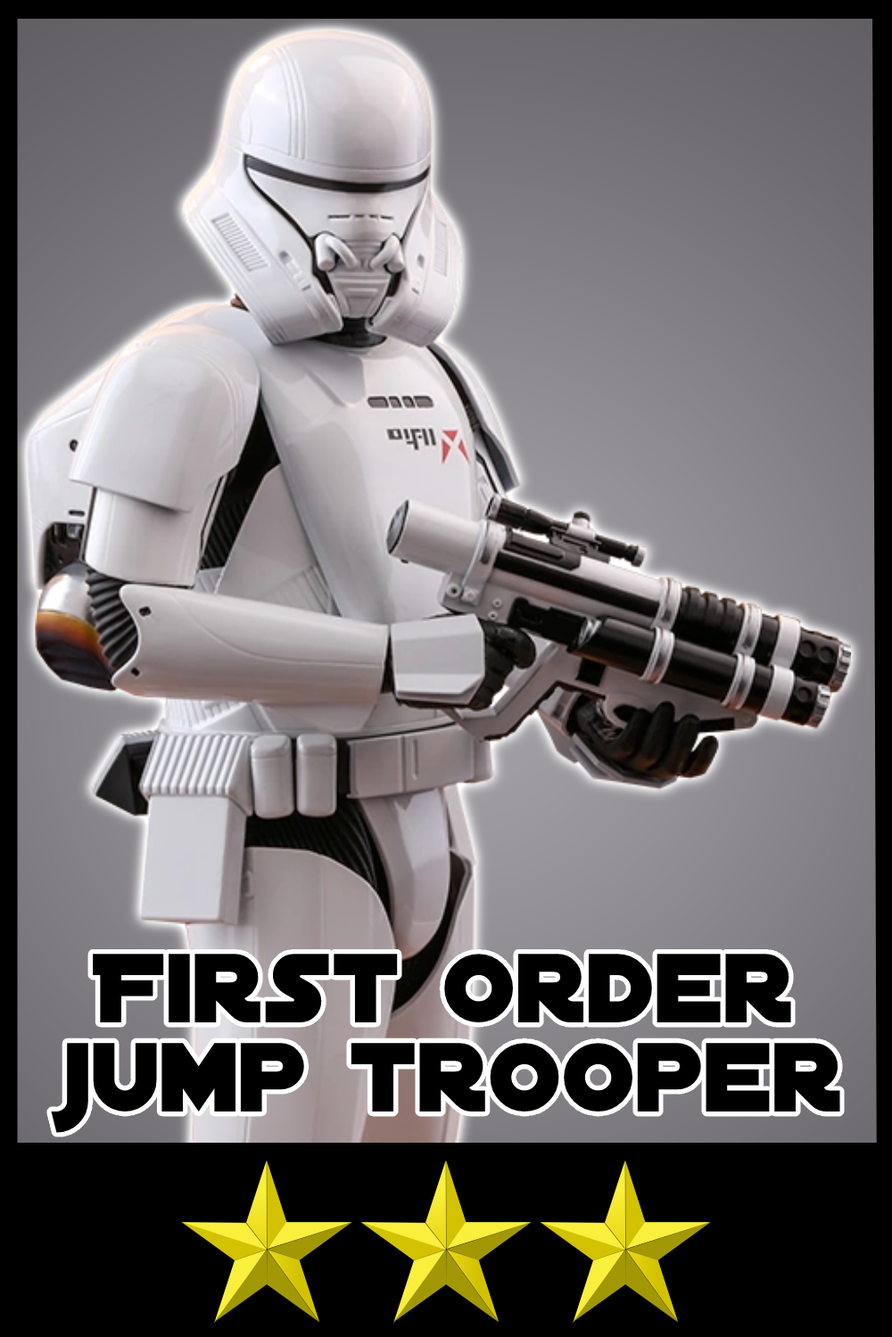
<style>
.page{position:relative;width:892px;height:1337px;background:#000000}
.page>*{position:absolute;margin:0}
.t1{font:105.2px/88.7px "DistantGalaxy";color:#000000}
</style>
<div class="page">
<p class="t1" style="left:51px;top:954px;width:789px;height:179px;text-align:center">First order<br>jump trooper</p>
</div>
